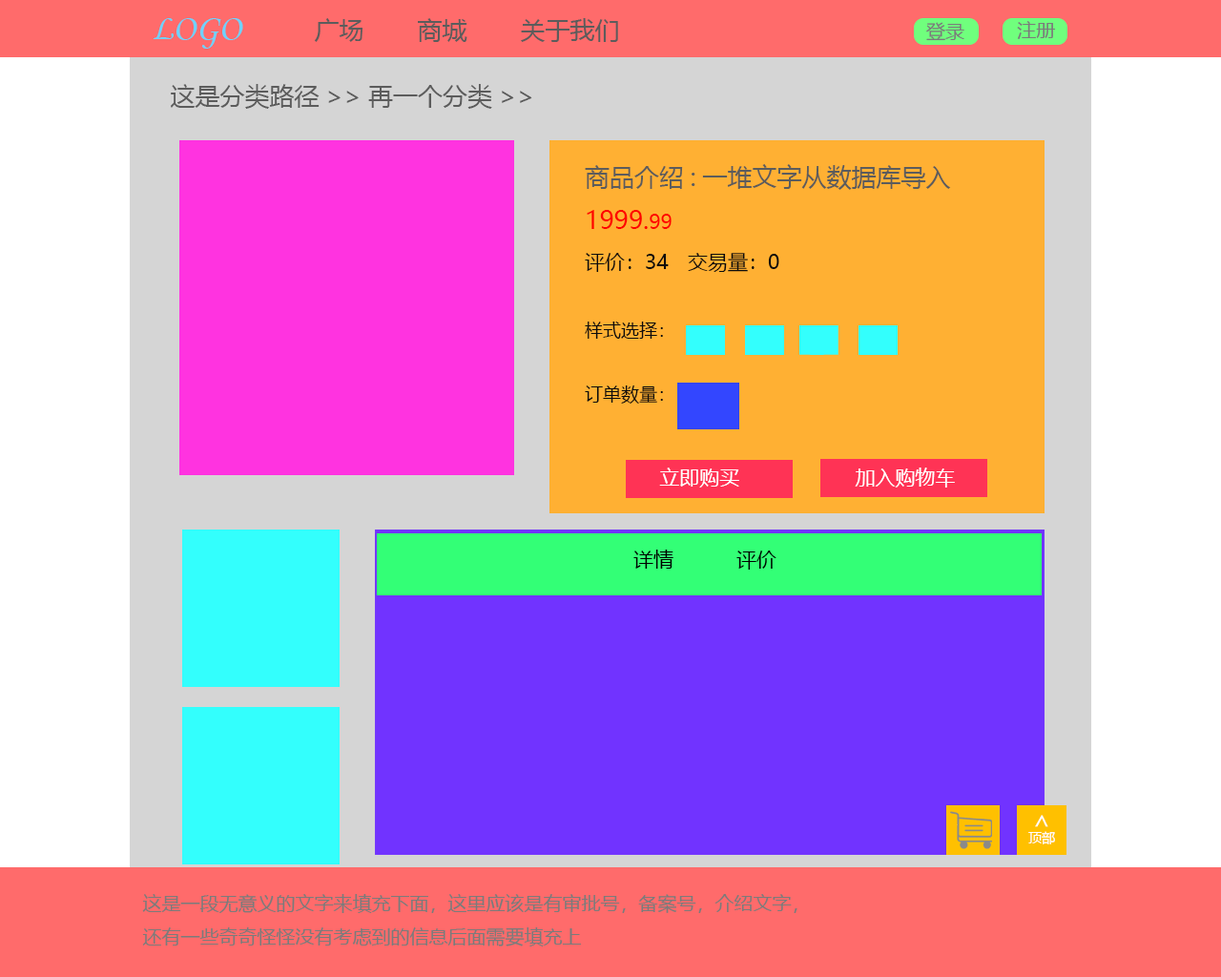
<style>
.page{position:relative;width:1221px;height:977px}
.page>*{position:absolute;margin:0}
.t1{font:24.8px "MicrosoftYaHei";color:#5c5c5c}
.t2{font:24.8px "MicrosoftYaHei";color:#ff0000}
.t3{font:20px "MicrosoftYaHei";color:#ff0000}
.t4{font:20px "MicrosoftYaHei";color:#0c0c0c}
.t5{font:18.1px "MicrosoftYaHei";color:#0c0c0c}
.t6{font:20px "MicrosoftYaHei";color:#ffffff}
.t7{font:20px "MicrosoftYaHei";color:#ff3355}
.t8{font:20px "MicrosoftYaHei";color:#000000}
.t9{font:24.9px "MicrosoftYaHei";color:#ffffff}
.t10{font:13.4px "MicrosoftYaHei";color:#ffffff}
</style>
<div class="page">
<p class="t1" style="left:314px;top:18px;width:304px;height:24px">广场  商城  关于我们</p>
<p class="t1" style="left:171px;top:84px;width:361px;height:25px">这是分类路径&gt;&gt;再一个分类&gt;&gt;</p>
<p class="t1" style="left:585px;top:164px;width:366px;height:239px">商品介绍:一堆文字从数据库导入<br><span class="t2">1999.</span><span class="t3">99<br></span><span class="t4">评价：34 交易量：0<br><br></span><span class="t5">样式选择：<br><br>订单数量：</span></p>
<p class="t6" style="left:650px;top:467px;width:305px;height:20px"><span class="t7">l</span>立即购买    加入购物车</p>
<p class="t8" style="left:633px;top:549px;width:143px;height:20px">详情  评价</p>
<p class="t9" style="left:1035px;top:815px;width:13px;height:12px;rotate:-90deg">&gt;</p>
<p class="t10" style="left:1028px;top:831px;width:27px;height:13px">顶部</p>
</div>
